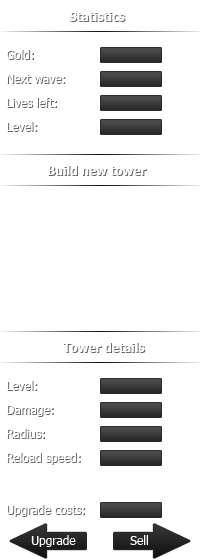
<style>
.page{position:relative;width:200px;height:560px;background:#ffffff}
.page>*{position:absolute;margin:0}
.t1{font:12px "Tahoma-Bold";color:#ffffff}
.t2{font:12px "Tahoma";color:#ffffff}
</style>
<div class="page">
<p class="t1" style="left:69px;top:12px;width:56px;height:9px">Statistics</p>
<p class="t1" style="left:70px;top:13px;width:56px;height:9px;opacity:0.6">Statistics</p>
<p class="t2" style="left:6px;top:49px;width:27px;height:10px">Gold:</p>
<p class="t2" style="left:7px;top:50px;width:27px;height:10px;opacity:0.6">Gold:</p>
<p class="t2" style="left:6px;top:74px;width:59px;height:9px">Next wave:</p>
<p class="t2" style="left:7px;top:75px;width:59px;height:9px;opacity:0.6">Next wave:</p>
<p class="t2" style="left:6px;top:97px;width:50px;height:10px">Lives left:</p>
<p class="t2" style="left:7px;top:98px;width:50px;height:10px;opacity:0.6">Lives left:</p>
<p class="t2" style="left:6px;top:121px;width:31px;height:10px">Level:</p>
<p class="t2" style="left:7px;top:122px;width:31px;height:10px;opacity:0.6">Level:</p>
<p class="t1" style="left:47px;top:165px;width:99px;height:10px">Build new tower</p>
<p class="t1" style="left:48px;top:166px;width:99px;height:10px;opacity:0.6">Build new tower</p>
<p class="t1" style="left:62px;top:342px;width:83px;height:10px">Tower details</p>
<p class="t1" style="left:63px;top:343px;width:83px;height:10px;opacity:0.6">Tower details</p>
<p class="t2" style="left:6px;top:380px;width:31px;height:10px">Level:</p>
<p class="t2" style="left:7px;top:381px;width:31px;height:10px;opacity:0.6">Level:</p>
<p class="t2" style="left:6px;top:405px;width:47px;height:11px">Damage:</p>
<p class="t2" style="left:7px;top:406px;width:47px;height:11px;opacity:0.6">Damage:</p>
<p class="t2" style="left:6px;top:428px;width:38px;height:10px">Radius:</p>
<p class="t2" style="left:7px;top:429px;width:38px;height:10px;opacity:0.6">Radius:</p>
<p class="t2" style="left:6px;top:452px;width:74px;height:12px">Reload speed:</p>
<p class="t2" style="left:7px;top:453px;width:74px;height:12px;opacity:0.6">Reload speed:</p>
<p class="t2" style="left:6px;top:504px;width:78px;height:12px">Upgrade costs:</p>
<p class="t2" style="left:7px;top:505px;width:78px;height:12px;opacity:0.6">Upgrade costs:</p>
<p class="t2" style="left:31px;top:535px;width:45px;height:12px">Upgrade</p>
<p class="t2" style="left:130px;top:535px;width:18px;height:10px">Sell</p>
</div>
